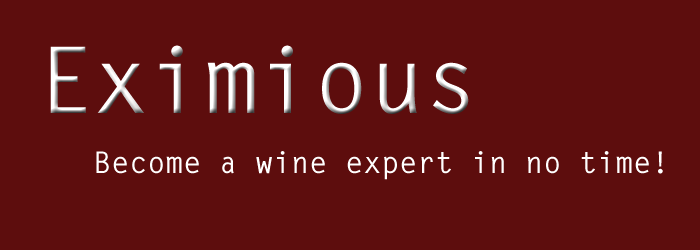
<style>
.page{position:relative;width:700px;height:250px;background:#5d0d0d}
.page>*{position:absolute;margin:0}
.t1{font:92px "LetterGothicStd-Bold"}
.t2{font:30px "LetterGothicStd-Bold";color:#ffffff}
</style>
<div class="page">
<p class="t1" style="left:50px;top:45px;width:419px;height:69px">Eximious</p>
<p class="t2" style="left:96px;top:151px;width:567px;height:29px">Become a wine expert in no time!</p>
</div>
